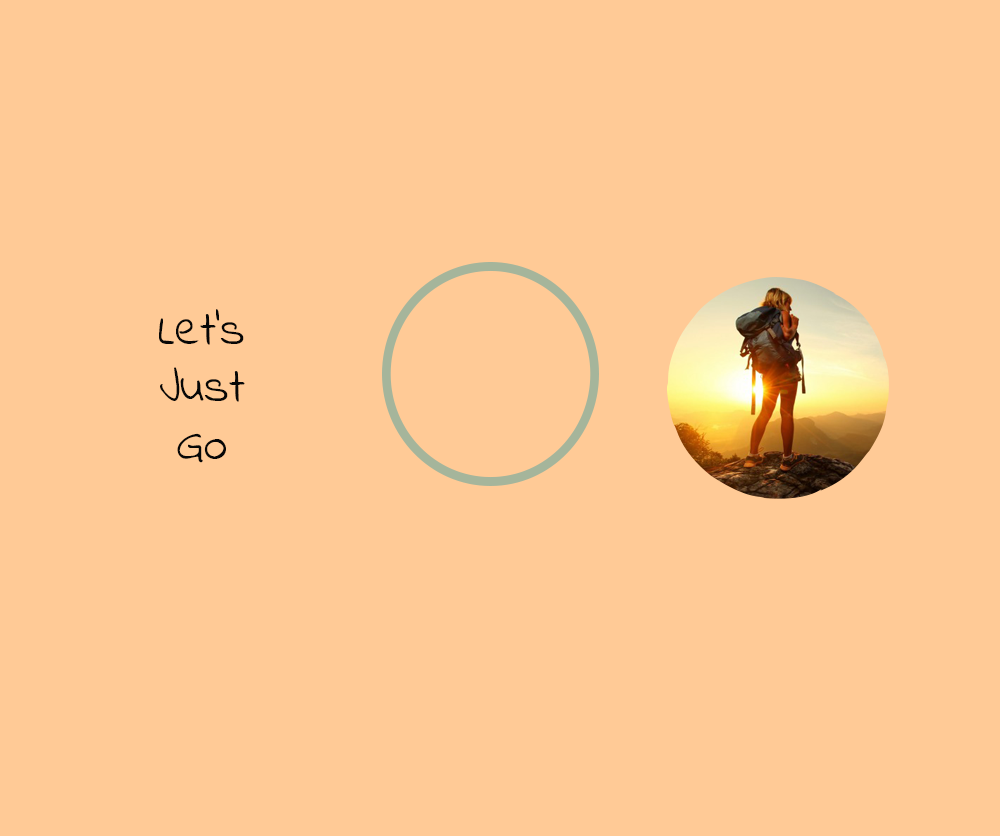
<style>
.page{position:relative;width:1000px;height:836px;background:#ffca96}
.page>*{position:absolute;margin:0}
.t1{font:48px "IndieFlower";color:#070707}
</style>
<div class="page">
<p class="t1" style="left:159px;top:309px;width:86px;height:154px;text-align:center">Let’s<br>Just<br>Go</p>
</div>
